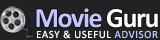
<style>
.page{position:relative;width:160px;height:40px;background:#222222}
.page>*{position:absolute;margin:0}
.t1{font:28px "Calibri-Bold";letter-spacing:-0.05em;color:#c2c5ff}
.t2{font:28px "Calibri-Bold";letter-spacing:-0.05em;color:#ffffff}
.t3{font:11px "Calibri";letter-spacing:0.05em;color:#ffffff}
.t4{font:11px "Calibri";letter-spacing:0.05em;color:#c2c5ff}
</style>
<div class="page">
<p class="t1" style="left:36px;top:8px;width:122px;height:20px">Movie <span class="t2">Guru</span></p>
<p class="t3" style="left:37px;top:30px;width:121px;height:9px">EASY &amp; USEFUL <span class="t4">ADVISOR</span></p>
</div>
